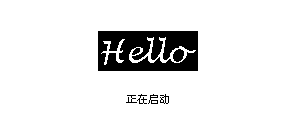
<style>
.page{position:relative;width:296px;height:128px;background:#ffffff}
.page>*{position:absolute;margin:0}
.t1{font:30px "LucidaHandwriting-Italic";color:#ffffff}
.t2{font:11px "OPPOSans-R";color:#000000}
</style>
<div class="page">
<p class="t1" style="left:101px;top:37px;width:95px;height:28px">Hello</p>
<p class="t2" style="left:126px;top:94px;width:43px;height:10px">正在启动</p>
</div>
